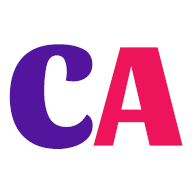
<style>
.page{position:relative;width:192px;height:192px;background:#ffffff}
.page>*{position:absolute;margin:0}
.t1{font:149px "Sansita-ExtraBold";color:#53159d}
.t2{font:149px "Sansita-ExtraBold";color:#ed145b}
</style>
<div class="page">
<p class="t1" style="left:9px;top:44px;width:174px;height:105px">C<span class="t2">A</span></p>
</div>
